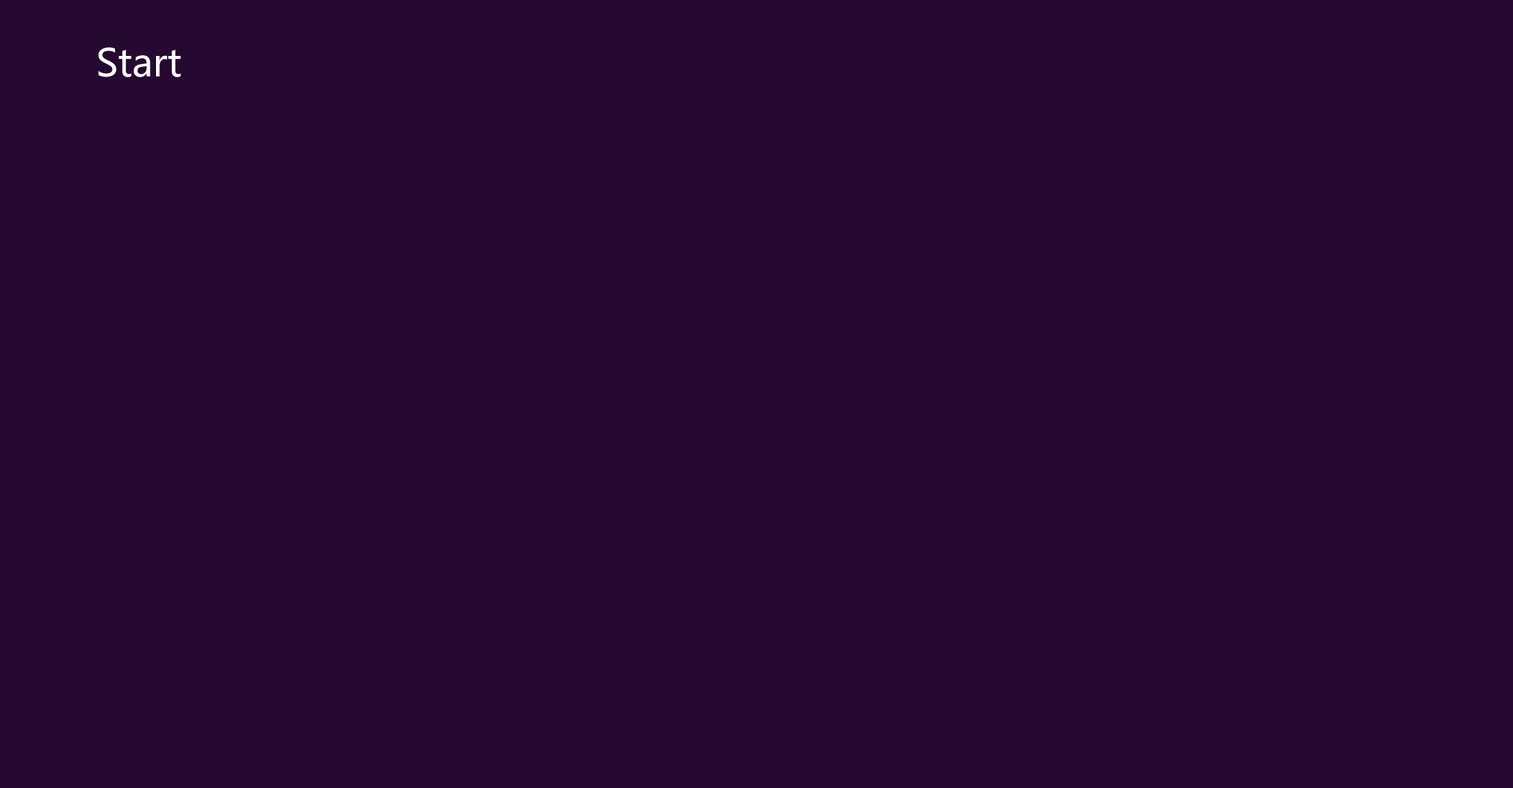
<style>
.page{position:relative;width:1513px;height:788px;background:#260930}
.page>*{position:absolute;margin:0}
.t1{font:37.8px "MicrosoftYaHei";color:#ffffff}
</style>
<div class="page">
<p class="t1" style="left:99px;top:47px;width:82px;height:30px">Start</p>
</div>
